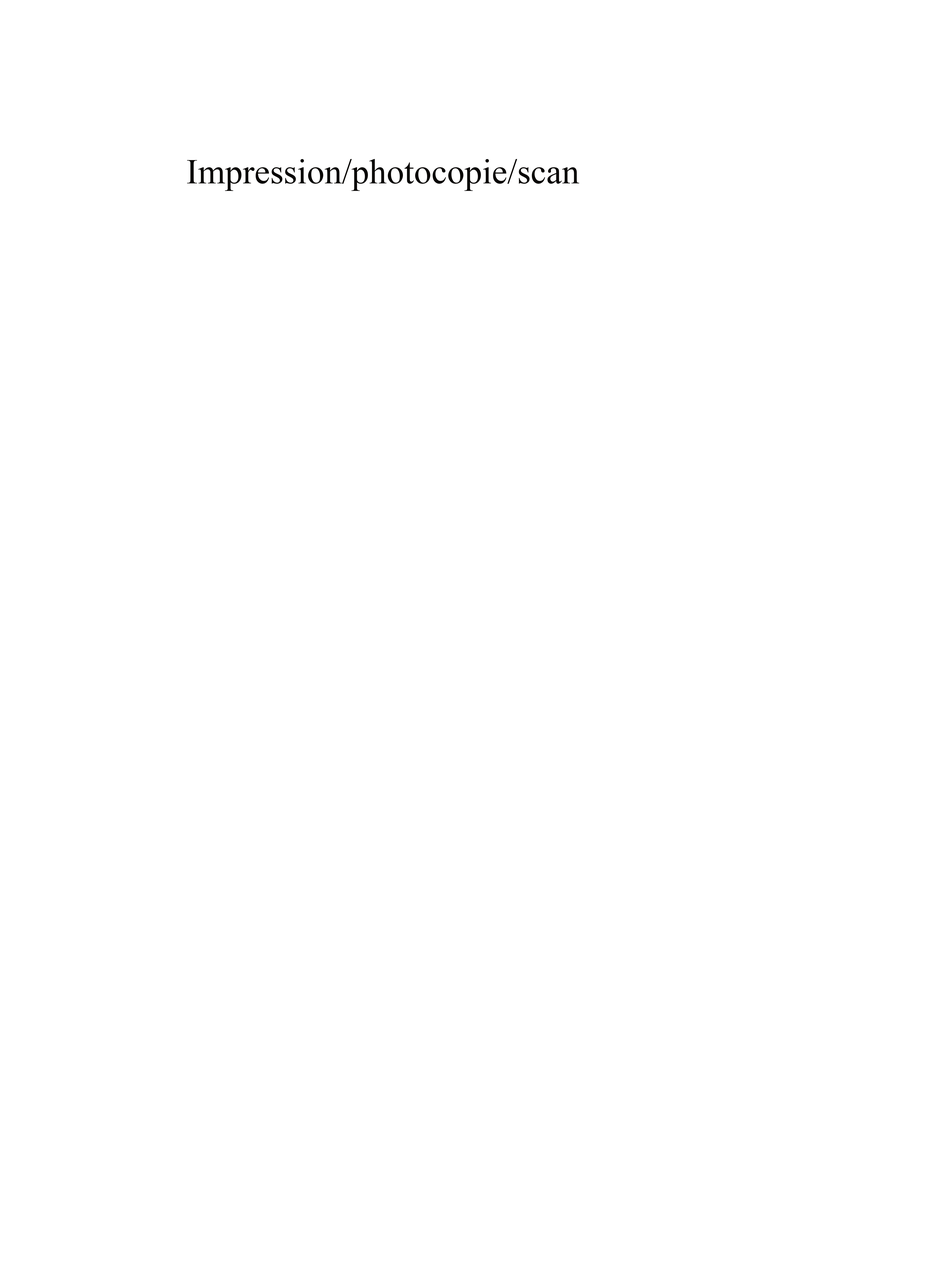
<style>
.page{position:relative;width:946px;height:1261px;background:#ffffff}
.page>*{position:absolute;margin:0}
.t1{font:35px "TimesNewRomanPSMT";color:#090705}
</style>
<div class="page">
<p class="t1" style="left:187px;top:159px;width:392px;height:32px">Impression/photocopie/scan</p>
</div>
